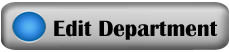
<style>
.page{position:relative;width:229px;height:52px}
.page>*{position:absolute;margin:0}
.t1{font:22.9px "BritannicBold";color:#000000}
</style>
<div class="page">
<p class="t1" style="left:54px;top:20px;width:164px;height:20px">Edit Department</p>
</div>
